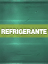
<style>
.page{position:relative;width:48px;height:64px}
.page>*{position:absolute;margin:0}
.t1{font:9.9px "HelveticaNowText-Black";letter-spacing:-0.05em;scale:0.59 1}
</style>
<div class="page">
<p class="t1" style="left:1px;top:27px;width:46px;height:9px">REFRIGERANTE</p>
</div>
